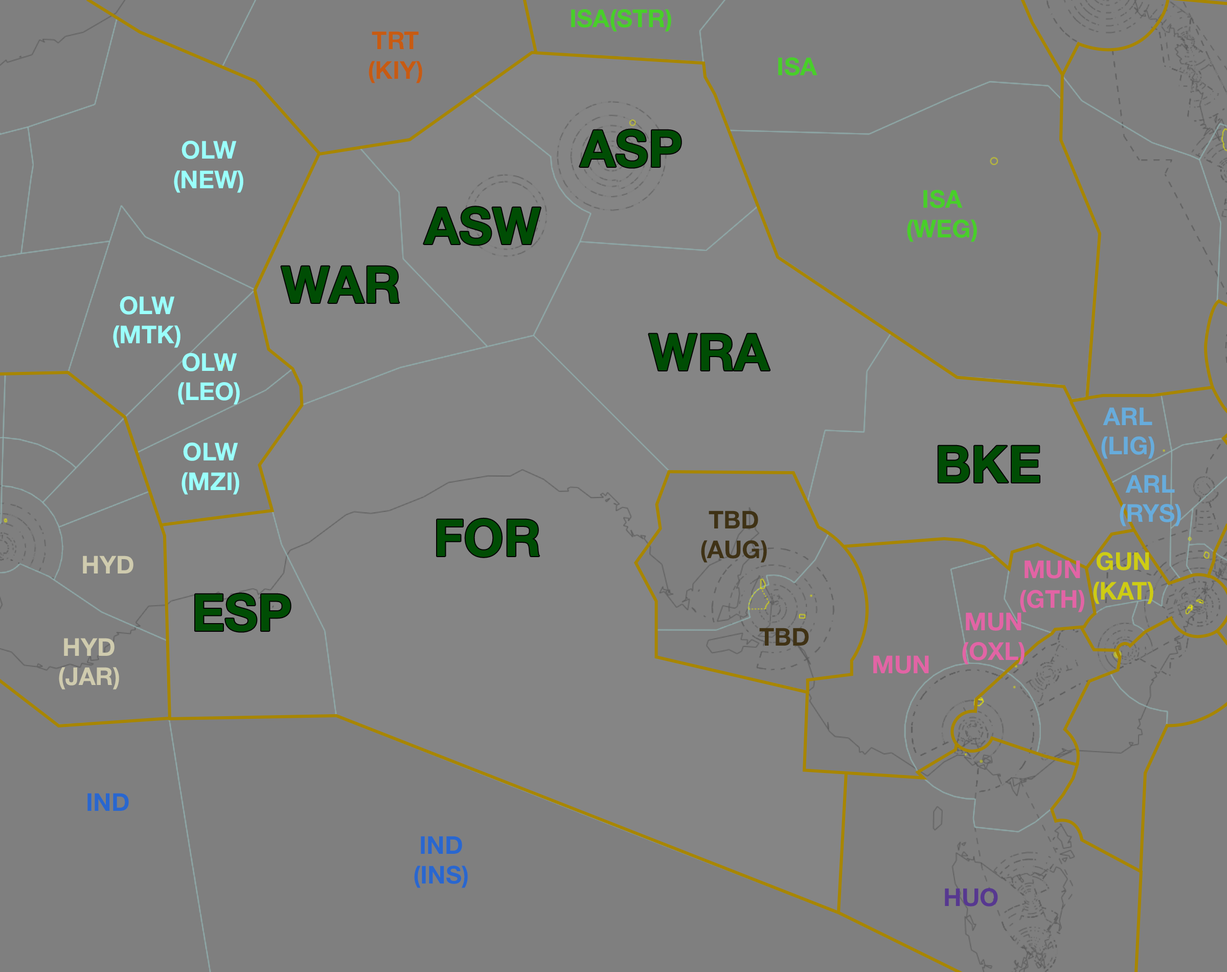
<style>
.page{position:relative;width:1227px;height:972px;background:#7f7f7f}
.page>*{position:absolute;margin:0}
.t1{font:24.5px "HelveticaNeue-Bold";color:#48cf29}
.t2{font:24.5px "HelveticaNeue-Bold";color:#c75b12}
.t3{font:51.1px "HelveticaNeue-Bold";color:#004d04}
.t4{font:24.5px "HelveticaNeue-Bold";color:#9afffb}
.t5{font:24.5px "HelveticaNeue-Bold";color:#67acdc}
.t6{font:24.5px "HelveticaNeue-Bold";color:#3f3215}
.t7{font:24.5px "HelveticaNeue-Bold";color:#cfcbae}
.t8{font:24.5px "HelveticaNeue-Bold";color:#cecc13}
.t9{font:24.5px "HelveticaNeue-Bold";color:#e264a5}
.t10{font:24.5px "HelveticaNeue-Bold";color:#403214}
.t11{font:24.5px "HelveticaNeue-Bold";color:#2967cf}
.t12{font:24.5px "HelveticaNeue-Bold";color:#573890}
</style>
<div class="page">
<p class="t1" style="left:571px;top:9px;width:100px;height:23px">ISA(STR)</p>
<p class="t2" style="left:369px;top:31px;width:53px;height:52px;text-align:center">TRT<br>(KIY)</p>
<p class="t1" style="left:778px;top:57px;width:40px;height:19px">ISA</p>
<p class="t3" style="left:580px;top:129px;width:101px;height:39px">ASP</p>
<p class="t4" style="left:174px;top:141px;width:69px;height:52px;text-align:center">OLW<br>(NEW)</p>
<p class="t1" style="left:907px;top:190px;width:70px;height:52px;text-align:center">ISA<br>(WEG)</p>
<p class="t3" style="left:424px;top:207px;width:117px;height:38px">ASW</p>
<p class="t3" style="left:281px;top:266px;width:118px;height:37px">WAR</p>
<p class="t4" style="left:113px;top:296px;width:68px;height:52px;text-align:center">OLW<br>(MTK)</p>
<p class="t3" style="left:649px;top:333px;width:121px;height:37px">WRA</p>
<p class="t4" style="left:178px;top:353px;width:62px;height:51px;text-align:center">OLW<br>(LEO)</p>
<p class="t5" style="left:1101px;top:407px;width:54px;height:52px;text-align:center">ARL<br>(LIG)</p>
<p class="t4" style="left:182px;top:442px;width:57px;height:52px;text-align:center">OLW<br>(MZI)</p>
<p class="t3" style="left:938px;top:445px;width:102px;height:37px">BKE</p>
<p class="t5" style="left:1120px;top:475px;width:61px;height:51px;text-align:center">ARL<br>(RYS)</p>
<p class="t3" style="left:437px;top:519px;width:102px;height:38px">FOR</p>
<p class="t6" style="left:701px;top:510px;width:66px;height:53px;text-align:center">TBD<br>(AUG)</p>
<p class="t7" style="left:83px;top:555px;width:50px;height:18px">HYD</p>
<p class="t8" style="left:1093px;top:552px;width:61px;height:52px;text-align:center">GUN<br>(KAT)</p>
<p class="t9" style="left:1020px;top:560px;width:65px;height:52px;text-align:center">MUN<br>(GTH)</p>
<p class="t3" style="left:195px;top:593px;width:95px;height:39px">ESP</p>
<p class="t9" style="left:962px;top:612px;width:63px;height:52px;text-align:center">MUN<br>(OXL)</p>
<p class="t10" style="left:759px;top:627px;width:50px;height:18px">TBD</p>
<p class="t7" style="left:59px;top:638px;width:60px;height:51px;text-align:center">HYD<br>(JAR)</p>
<p class="t9" style="left:873px;top:655px;width:56px;height:18px">MUN</p>
<p class="t11" style="left:87px;top:793px;width:42px;height:18px">IND</p>
<p class="t11" style="left:414px;top:836px;width:54px;height:52px;text-align:center">IND<br>(INS)</p>
<p class="t12" style="left:945px;top:888px;width:53px;height:18px">HUO</p>
</div>
